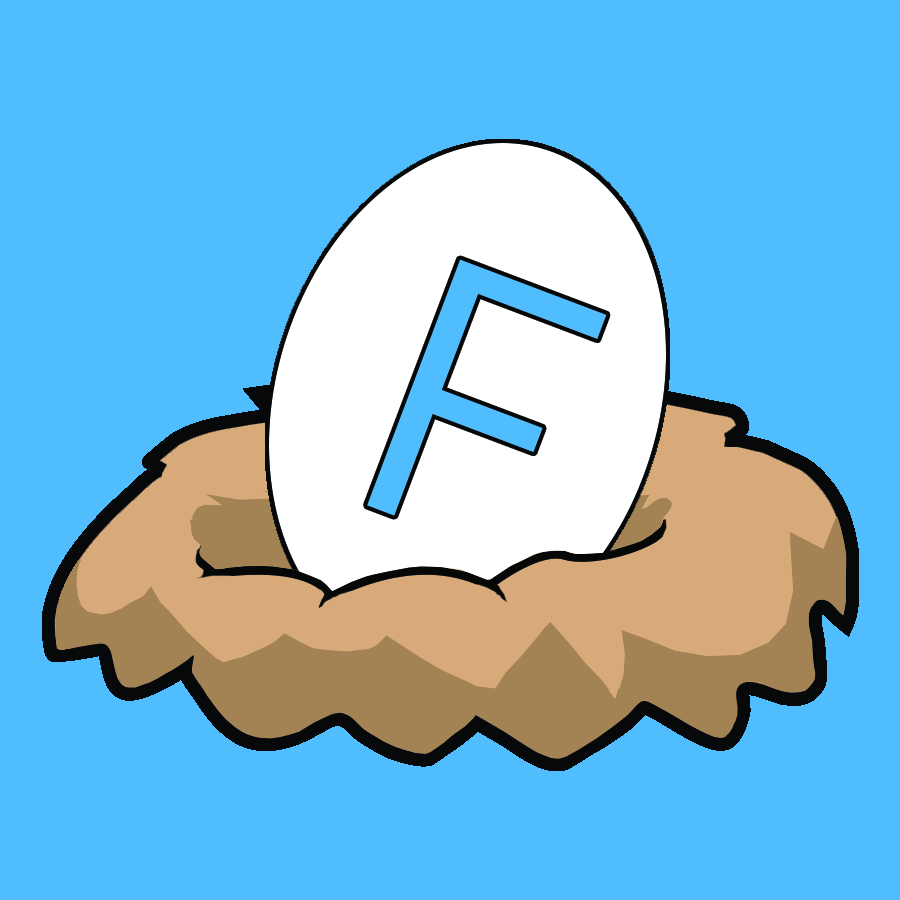
<style>
.page{position:relative;width:900px;height:900px;background:#50bdff}
.page>*{position:absolute;margin:0}
.t1{font:379.7px "TitilliumWeb-Regular";color:#50bdff;text-transform:uppercase}
</style>
<div class="page">
<p class="t1" style="left:367px;top:259px;width:240px;height:257px;rotate:21deg">F</p>
</div>
